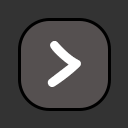
<style>
.page{position:relative;width:128px;height:128px;background:#333333}
.page>*{position:absolute;margin:0}
.t1{font:100px "ComicSansMS";letter-spacing:0.05em;color:#ffffff}
</style>
<div class="page">
<p class="t1" style="left:47px;top:41px;width:34px;height:46px">&gt;</p>
</div>
